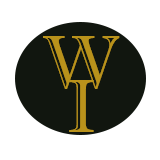
<style>
.page{position:relative;width:160px;height:160px;background:#ffffff}
.page>*{position:absolute;margin:0}
.t1{font:75px "ImprintMT-Shadow";color:#b9921b}
</style>
<div class="page">
<p class="t1" style="left:43px;top:36px;width:77px;height:53px">W</p>
<p class="t1" style="left:69px;top:80px;width:25px;height:52px">I</p>
</div>
